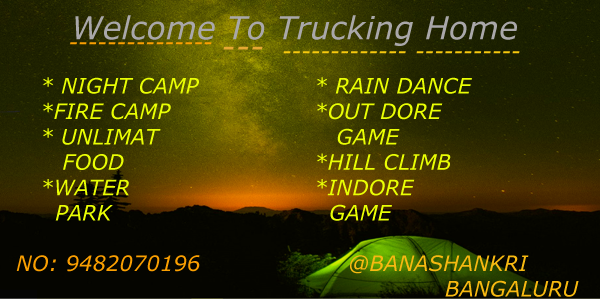
<style>
.page{position:relative;width:600px;height:300px}
.page>*{position:absolute;margin:0}
.t1{font:31.8px "Verdana-Italic";color:#a9a7a9}
.t2{font:21.2px "Verdana-Italic";color:#fa9f01}
.t3{font:31.7px "Verdana-Italic";color:#e5a833}
.t4{font:21.2px "Verdana-Italic";color:#f6c80e}
.t5{font:21.2px "Verdana-Italic";color:#e9fe04}
.t6{font:21.2px "Verdana-Italic";color:#f7b911}
</style>
<div class="page">
<p class="t1" style="left:75px;top:15px;width:442px;height:31px">Welcome To Trucking Home</p>
<p class="t2" style="left:70px;top:42px;width:142px;height:3px">---------------</p>
<p class="t3" style="left:223px;top:46px;width:40px;height:4px">---</p>
<p class="t4" style="left:283px;top:51px;width:123px;height:3px">-------------</p>
<p class="t4" style="left:416px;top:51px;width:104px;height:3px">-----------</p>
<p class="t5" style="left:43px;top:77px;width:156px;height:144px">* NIGHT CAMP<br>*FIRE CAMP<br>* UNLIMAT <br>   FOOD<br>*WATER <br>  PARK</p>
<p class="t5" style="left:317px;top:77px;width:155px;height:144px">* RAIN DANCE<br>*OUT DORE <br>   GAME<br>*HILL CLIMB<br>*INDORE<br>  GAME</p>
<p class="t2" style="left:16px;top:255px;width:184px;height:17px">NO: 9482070196</p>
<p class="t6" style="left:350px;top:255px;width:229px;height:42px">@BANASHANKRI <br>             BANGALURU</p>
</div>
